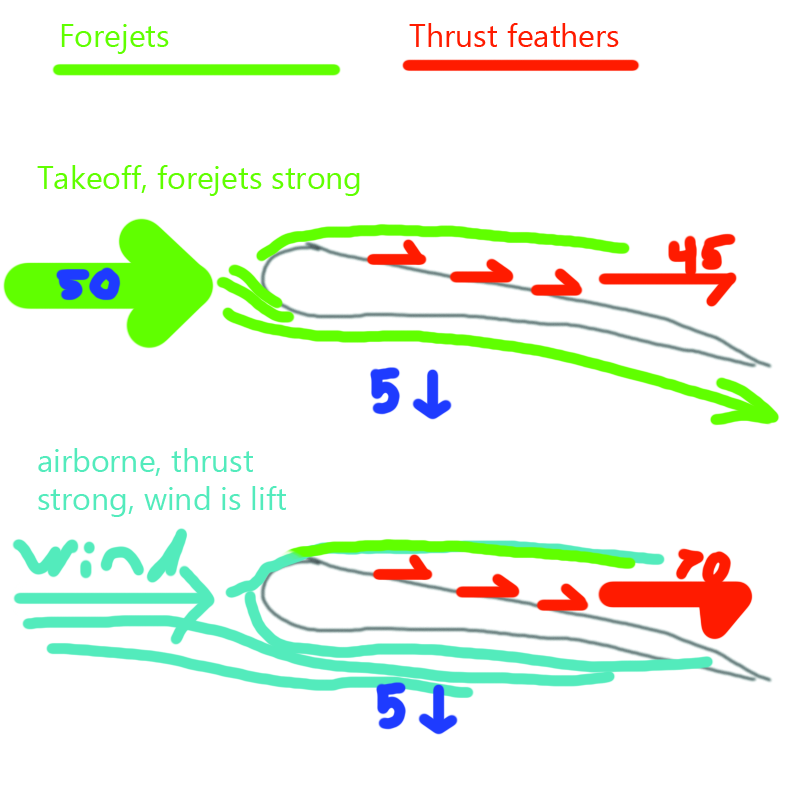
<style>
.page{position:relative;width:796px;height:789px;background:#ffffff}
.page>*{position:absolute;margin:0}
.t1{font:32px "MicrosoftNewTaiLue";color:#60ff00}
.t2{font:32px "MicrosoftNewTaiLue";color:#ff1b00}
.t3{font:32px "MicrosoftNewTaiLue";color:#53ebbc}
</style>
<div class="page">
<p class="t1" style="left:61px;top:24px;width:108px;height:30px">Forejets</p>
<p class="t2" style="left:409px;top:23px;width:210px;height:24px">Thrust feathers</p>
<p class="t1" style="left:37px;top:165px;width:323px;height:31px">Takeoff, forejets strong</p>
<p class="t3" style="left:38px;top:448px;width:248px;height:69px">airborne, thrust strong, wind is lift</p>
</div>
